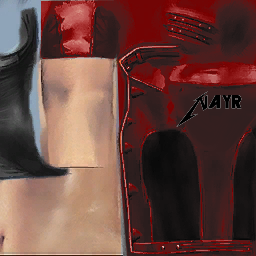
<style>
.page{position:relative;width:256px;height:256px}
.page>*{position:absolute;margin:0}
.t1{font:36px "PastorofMuppets";color:#000000}
</style>
<div class="page">
<p class="t1" style="left:176px;top:91px;width:66px;height:36px">Nayr</p>
</div>
